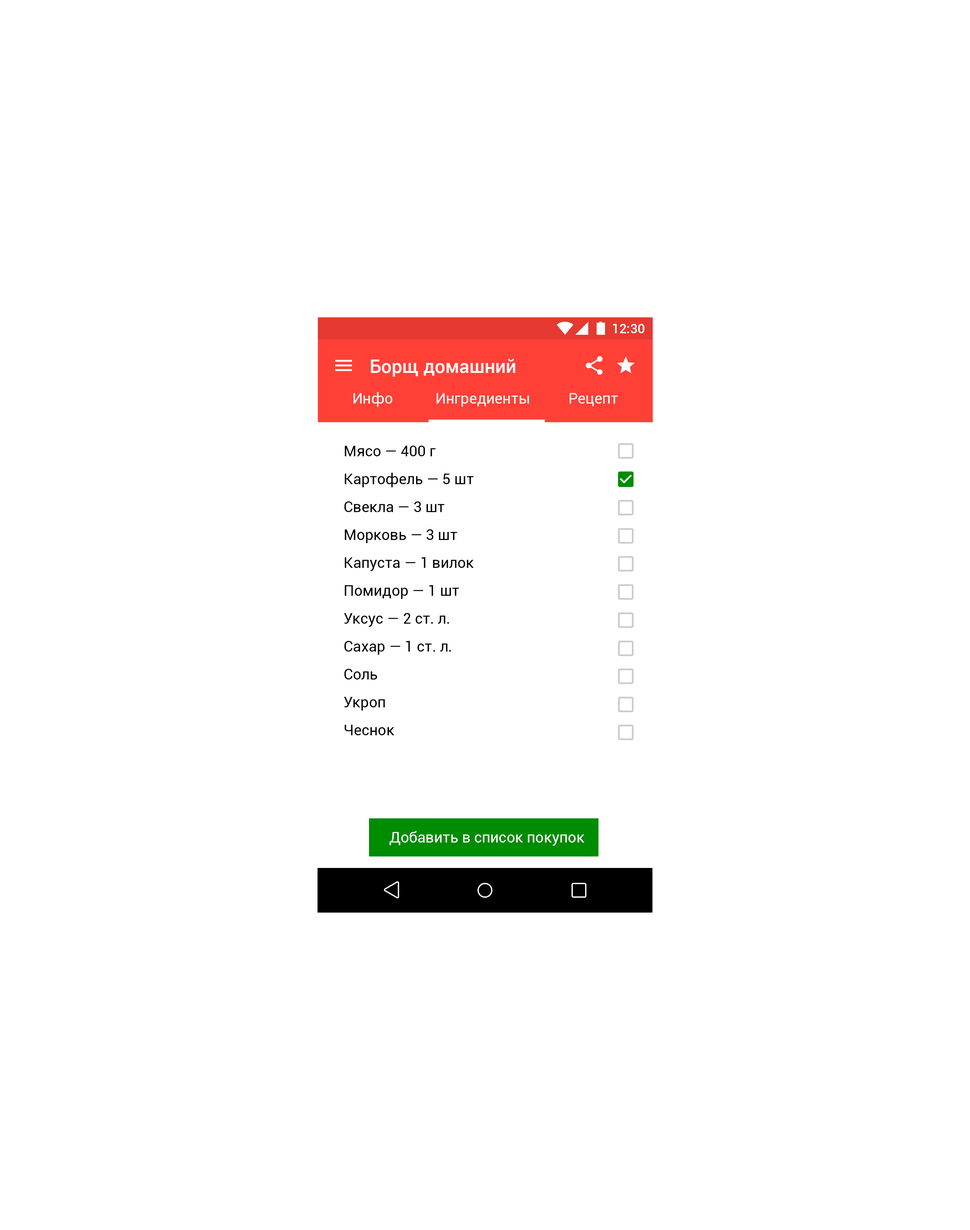
<style>
.page{position:relative;width:970px;height:1230px;background:#ffffff}
.page>*{position:absolute;margin:0}
.t1{font:13px "Roboto-Medium";color:#ffffff}
.t2{font:18.6px "Roboto-Medium";color:#ffffff}
.t3{font:14.9px "Roboto-Regular";color:#ffffff}
.t4{font:14.9px/27.9px "Roboto-Regular";color:#000000}
</style>
<div class="page">
<p class="t1" style="left:613px;top:324px;width:31px;height:9px">12:30</p>
<p class="t2" style="left:371px;top:359px;width:144px;height:18px">Борщ домашний</p>
<p class="t3" style="left:353px;top:392px;width:39px;height:15px">Инфо</p>
<p class="t3" style="left:436px;top:393px;width:93px;height:14px">Ингредиенты</p>
<p class="t3" style="left:569px;top:393px;width:48px;height:13px">Рецепт</p>
<p class="t4" style="left:344px;top:445px;width:130px;height:290px">Мясо — 400 г<br>Картофель — 5 шт<br>Свекла — 3 шт<br>Морковь — 3 шт<br>Капустa — 1 вилок<br>Помидор — 1 шт<br>Уксус — 2 ст. л.<br>Сахар — 1 ст. л.<br>Соль<br>Укроп<br>Чеснок</p>
<p class="t3" style="left:389px;top:831px;width:195px;height:15px">Добавить в список покупок</p>
</div>
